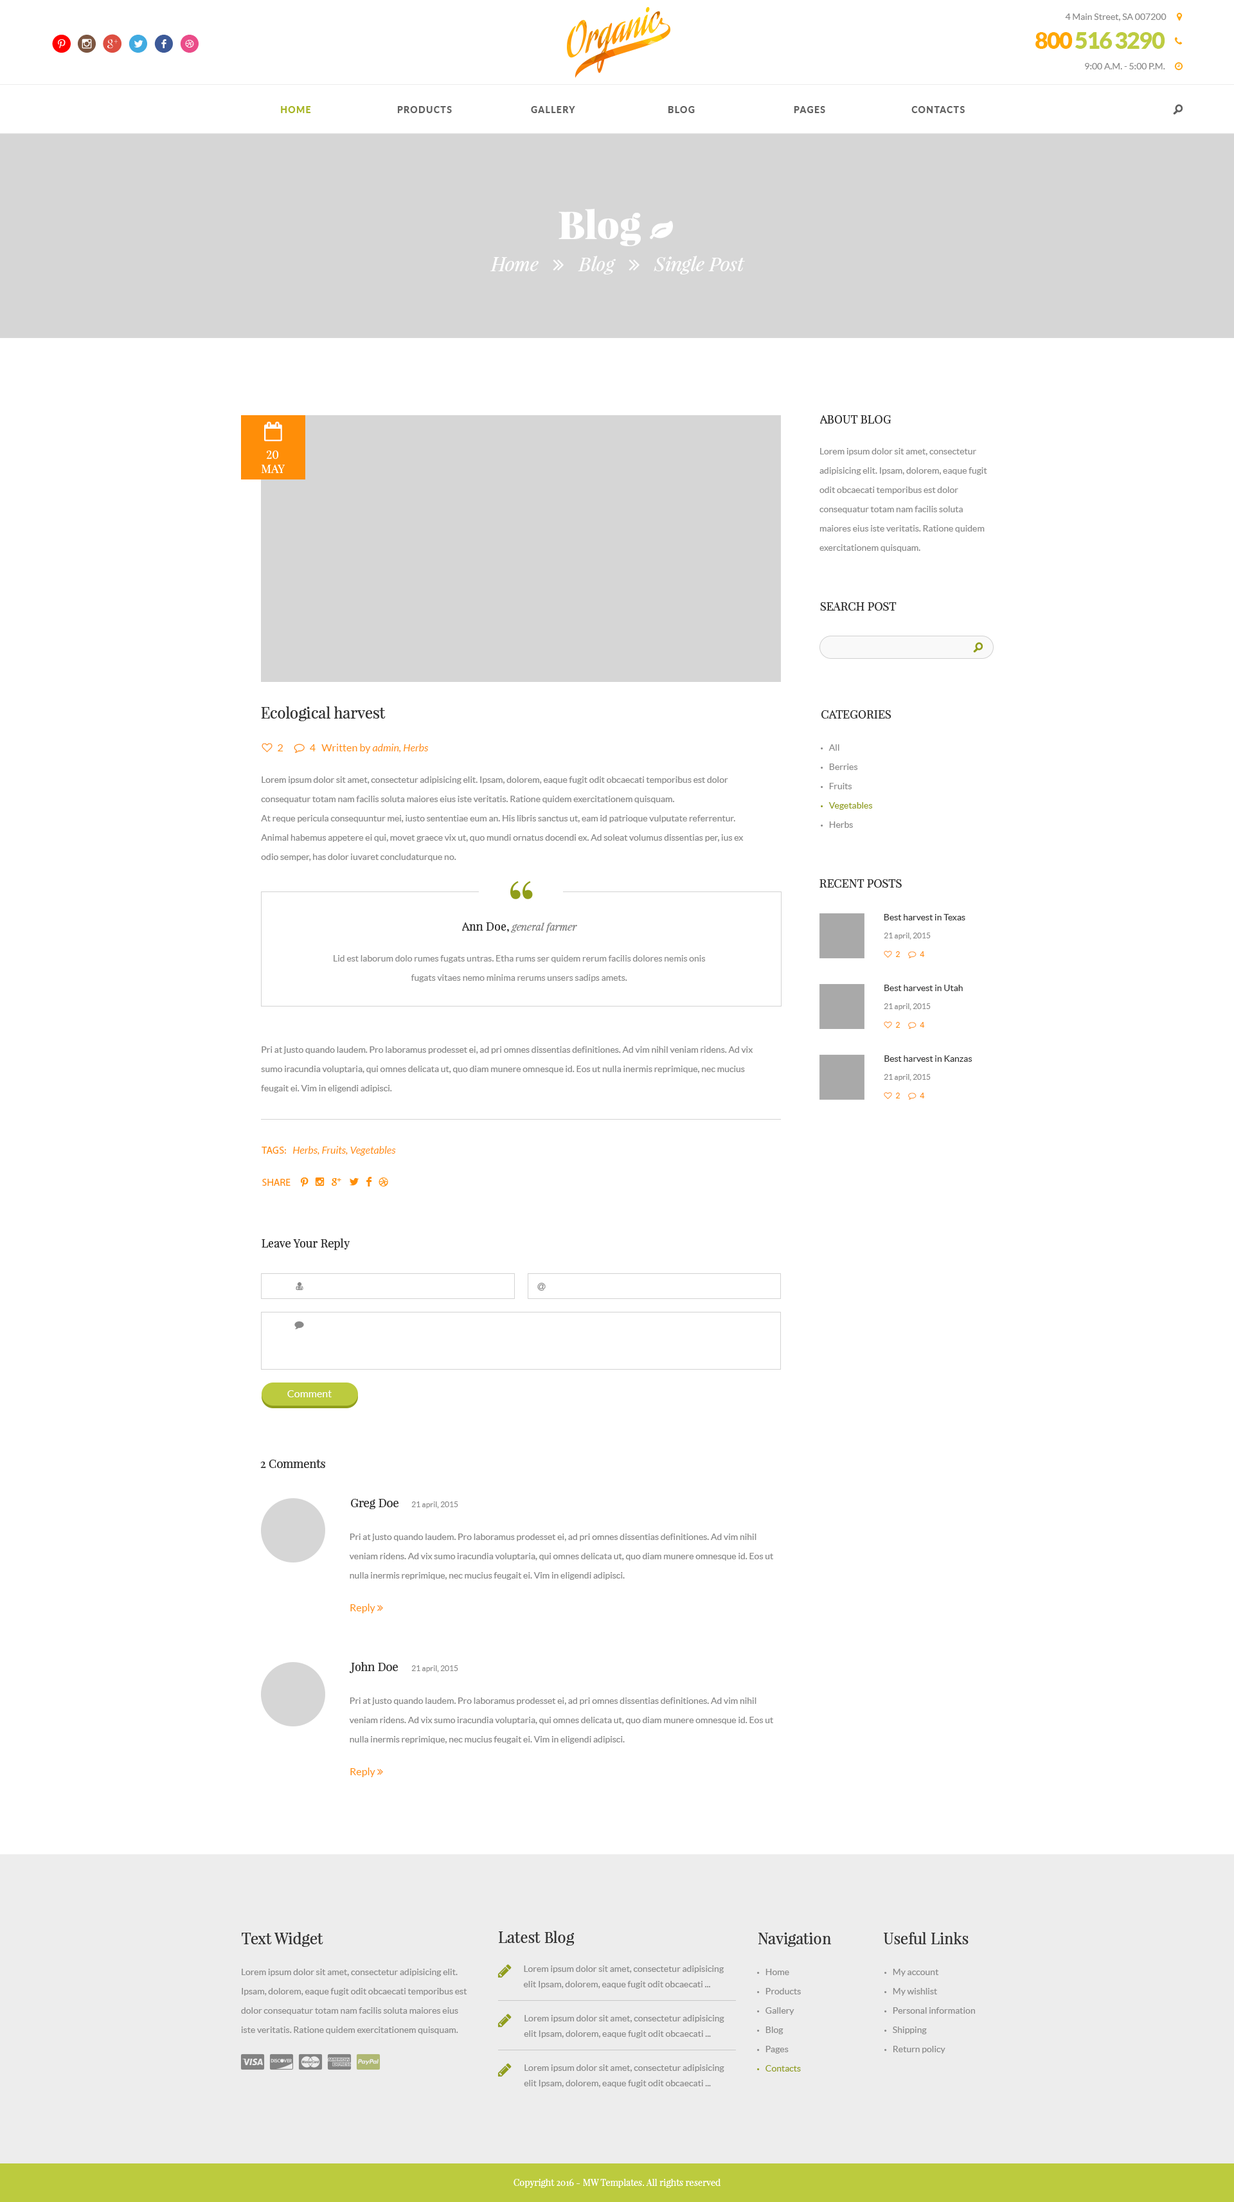
<style>
.page{position:relative;width:1234px;height:2202px;background:#ffffff}
.page>*{position:absolute;margin:0}
.t1{font:9px "Lato-Regular";color:#898989}
.t2{font:25.7px "SocialicoPlus";letter-spacing:0.2em;color:#ff0000}
.t3{font:25.7px "SocialicoPlus";letter-spacing:0.2em;color:#7c5641}
.t4{font:25.7px "SocialicoPlus";letter-spacing:0.2em;color:#dd4e41}
.t5{font:25.7px "Socialico";letter-spacing:0.2em;color:#41abe1}
.t6{font:25.7px "Socialico";letter-spacing:0.2em;color:#3d5a98}
.t7{font:25.7px "Socialico";letter-spacing:0.2em;color:#ea4c89}
.t8{font:23.1px "Lato-Black";letter-spacing:-0.05em;color:#bdcc41}
.t9{font:23.1px "Lato-Black";letter-spacing:-0.05em;color:#ffa800}
.t10{font:9px "Lato-Heavy";letter-spacing:0.1em;color:#a6b525;text-transform:uppercase}
.t11{font:9px "Lato-Heavy";letter-spacing:0.1em;color:#606060;text-transform:uppercase}
.t12{font:19.3px "SocialicoPlus";color:#606060;text-transform:uppercase}
.t13{font:11.6px "PlayfairDisplay-Regular";color:#333333;text-transform:uppercase}
.t14{font:9px/19.3px "Lato-Regular";color:#898989}
.t15{font:11.6px "PlayfairDisplay-Regular";color:#ffffff;text-transform:uppercase}
.t16{font:19.3px "SocialicoPlus";color:#909e1a;text-transform:uppercase}
.t17{font:15.4px "PlayfairDisplay-Regular";color:#333333}
.t18{font:9px/19.3px "Lato-Regular";color:#909e1a}
.t19{font:9px/19.3px "MyriadPro-Regular";color:#898989;text-transform:uppercase}
.t20{font:9px/19.3px "MyriadPro-Regular";color:#909e1a;text-transform:uppercase}
.t21{font:70.8px "PlayfairDisplay-Regular";color:#909e1a}
.t22{font:9px "Lato-Regular";color:#333333}
.t23{font:10.3px "PlayfairDisplay-Italic";color:#898989}
.t24{font:11.6px "PlayfairDisplay-Regular";color:#333333}
.t25{font:7.7px "Lato-Regular";color:#898989}
.t26{font:10.3px "Lato-Italic";color:#ff8e08}
.t27{font:10.3px "MyriadPro-Regular";color:#ff8e08}
.t28{font:15.4px "SocialicoPlus";letter-spacing:0.4em;color:#ff8e08;text-transform:uppercase}
.t29{font:15.4px "Socialico";letter-spacing:0.4em;color:#ff8e08;text-transform:uppercase}
.t30{font:10.3px "Lato-Regular";color:#ffffff}
.t31{font:9px/15.4px "Lato-Regular";color:#898989}
.t32{font:9px "PlayfairDisplay-Regular";color:#ffffff}
</style>
<div class="page">
<p class="t1" style="left:1065px;top:14px;width:102px;height:7px">4 Main Street, SA 007200</p>
<p class="t2" style="left:52px;top:34px;width:147px;height:19px">p<span class="t3">i</span><span class="t4">h</span><span class="t5">l</span><span class="t6">f</span><span class="t7">d</span></p>
<p class="t8" style="left:1036px;top:32px;width:130px;height:17px"><span class="t9">800</span> 516 3290</p>
<p class="t1" style="left:1085px;top:63px;width:81px;height:6px">9:00 A.M. - 5:00 P.M.</p>
<p class="t10" style="left:281px;top:106px;width:30px;height:7px">Home</p>
<p class="t11" style="left:397px;top:106px;width:55px;height:7px">Products</p>
<p class="t11" style="left:531px;top:106px;width:44px;height:7px">Gallery</p>
<p class="t11" style="left:668px;top:106px;width:27px;height:7px">Blog</p>
<p class="t11" style="left:794px;top:106px;width:31px;height:7px">Pages</p>
<p class="t11" style="left:912px;top:106px;width:53px;height:7px">Contacts</p>
<p class="t12" style="left:1173px;top:104px;width:11px;height:10px">o</p>
<p class="t13" style="left:820px;top:415px;width:71px;height:9px">About blog</p>
<p class="t14" style="left:820px;top:448px;width:167px;height:104px">Lorem ipsum dolor sit amet, consectetur adipisicing elit. Ipsam, dolorem, eaque fugit odit obcaecati temporibus est dolor consequatur totam nam facilis soluta maiores eius iste veritatis. Ratione quidem exercitationem quisquam.</p>
<p class="t15" style="left:262px;top:451px;width:23px;height:22px;text-align:center">20<br>may</p>
<p class="t13" style="left:820px;top:602px;width:77px;height:9px">Search post</p>
<p class="t16" style="left:973px;top:642px;width:11px;height:10px">o</p>
<p class="t17" style="left:261px;top:706px;width:125px;height:15px">Ecological harvest</p>
<p class="t13" style="left:822px;top:710px;width:70px;height:9px">Categories</p>
<p class="t18" style="left:821px;top:744px;width:52px;height:84px"><span class="t19">•   </span><span class="t14">All<br></span><span class="t19">•   </span><span class="t14">Berries<br></span><span class="t19">•   </span><span class="t14">Fruits<br></span><span class="t20">•   </span>Vegetables<br><span class="t19">•   </span><span class="t14">Herbs</span></p>
<p class="t14" style="left:261px;top:777px;width:492px;height:316px">Lorem ipsum dolor sit amet, consectetur adipisicing elit. Ipsam, dolorem, eaque fugit odit obcaecati temporibus est dolor consequatur totam nam facilis soluta maiores eius iste veritatis. Ratione quidem exercitationem quisquam.<br>At reque pericula consequuntur mei, iusto sententiae eum an. His libris sanctus ut, eam id patrioque vulputate referrentur. Animal habemus appetere ei qui, movet graece vix ut, quo mundi ornatus docendi ex. Ad soleat volumus dissentias per, ius ex odio semper, has dolor iuvaret concludaturque no.<br><br>At ponderum elaboraret reprehendunt eam, utroque similique te nam. Mazim simul hendrerit et eam, hinc duis ferri cu has, mel probo probatus praesent ea. Integre laboramus ea ius. Elit lorem mnesarchum ut cum. Ut legendos electram similique mea. Oblique fierent lobortis sed at, alii dicam ne vix.<br><br>Altera ullamcorper sit et. Ei dolor percipit accommodare vel. An quis velit constituto eum, his omnis denique ad, ad eam amet epicurei omittantur. Mel fuisset reformidans te, tale commodo ad nec.<br><br><br>Pri at justo quando laudem. Pro laboramus prodesset ei, ad pri omnes dissentias definitiones. Ad vim nihil veniam ridens. Ad vix sumo iracundia voluptaria, qui omnes delicata ut, quo diam munere omnesque id. Eos ut nulla inermis reprimique, nec mucius feugait ei. Vim in eligendi adipisci.</p>
<p class="t21" style="left:510px;top:881px;width:23px;height:18px">“</p>
<p class="t13" style="left:820px;top:879px;width:82px;height:9px">RECENT POSTS</p>
<p class="t22" style="left:884px;top:914px;width:82px;height:7px">Best harvest in Texas</p>
<p class="t23" style="left:462px;top:923px;width:115px;height:10px"><span class="t24">Ann Doe,</span> general farmer</p>
<p class="t25" style="left:884px;top:933px;width:47px;height:7px">21 april, 2015</p>
<p class="t14" style="left:334px;top:955px;width:372px;height:27px;text-align:center">Lid est laborum dolo rumes fugats untras. Etha rums ser quidem rerum facilis dolores nemis onis fugats vitaes nemo minima rerums unsers sadips amets.</p>
<p class="t22" style="left:885px;top:985px;width:78px;height:6px">Best harvest in Utah</p>
<p class="t25" style="left:884px;top:1004px;width:47px;height:7px">21 april, 2015</p>
<p class="t22" style="left:885px;top:1056px;width:88px;height:6px">Best harvest in Kanzas</p>
<p class="t25" style="left:884px;top:1074px;width:47px;height:7px">21 april, 2015</p>
<p class="t26" style="left:262px;top:1146px;width:134px;height:10px"><span class="t27">TAGS:  </span> Herbs, Fruits, Vegetables</p>
<p class="t27" style="left:262px;top:1179px;width:29px;height:7px">SHARE</p>
<p class="t28" style="left:301px;top:1177px;width:87px;height:10px">pih<span class="t29">lfd</span></p>
<p class="t24" style="left:262px;top:1238px;width:88px;height:12px">Leave Your Reply</p>
<p class="t30" style="left:287px;top:1390px;width:45px;height:8px">Comment</p>
<p class="t24" style="left:260px;top:1460px;width:65px;height:8px">2 Comments</p>
<p class="t24" style="left:351px;top:1499px;width:48px;height:10px">Greg Doe</p>
<p class="t25" style="left:411px;top:1502px;width:47px;height:7px">21 april, 2015</p>
<p class="t14" style="left:349px;top:1534px;width:424px;height:46px">Pri at justo quando laudem. Pro laboramus prodesset ei, ad pri omnes dissentias definitiones. Ad vim nihil veniam ridens. Ad vix sumo iracundia voluptaria, qui omnes delicata ut, quo diam munere omnesque id. Eos ut nulla inermis reprimique, nec mucius feugait ei. Vim in eligendi adipisci.</p>
<p class="t24" style="left:349px;top:1662px;width:49px;height:11px">John Doe</p>
<p class="t25" style="left:411px;top:1666px;width:47px;height:7px">21 april, 2015</p>
<p class="t14" style="left:349px;top:1698px;width:424px;height:46px">Pri at justo quando laudem. Pro laboramus prodesset ei, ad pri omnes dissentias definitiones. Ad vim nihil veniam ridens. Ad vix sumo iracundia voluptaria, qui omnes delicata ut, quo diam munere omnesque id. Eos ut nulla inermis reprimique, nec mucius feugait ei. Vim in eligendi adipisci.</p>
<p class="t17" style="left:242px;top:1932px;width:81px;height:15px">Text Widget</p>
<p class="t17" style="left:499px;top:1931px;width:76px;height:15px">Latest Blog</p>
<p class="t17" style="left:759px;top:1932px;width:73px;height:15px">Navigation</p>
<p class="t17" style="left:884px;top:1932px;width:85px;height:13px">Useful Links</p>
<p class="t14" style="left:241px;top:1969px;width:226px;height:66px">Lorem ipsum dolor sit amet, consectetur adipisicing elit. Ipsam, dolorem, eaque fugit odit obcaecati temporibus est dolor consequatur totam nam facilis soluta maiores eius iste veritatis. Ratione quidem exercitationem quisquam.</p>
<p class="t31" style="left:523px;top:1966px;width:201px;height:23px">Lorem ipsum dolor sit amet, consectetur adipisicing elit Ipsam, dolorem, eaque fugit odit obcaecati ...</p>
<p class="t14" style="left:757px;top:1969px;width:44px;height:103px"><span class="t19">•   </span>Home<br><span class="t19">•   </span>Products<br><span class="t19">•   </span>Gallery<br><span class="t19">•   </span>Blog<br><span class="t19">•   </span>Pages<br><span class="t20">•   </span><span class="t18">Contacts</span></p>
<p class="t14" style="left:885px;top:1969px;width:90px;height:85px"><span class="t19">•   </span>My account<br><span class="t19">•   </span>My wishlist<br><span class="t19">•   </span>Personal information<br><span class="t19">•   </span>Shipping<br><span class="t19">•   </span>Return policy</p>
<p class="t31" style="left:524px;top:2015px;width:200px;height:24px">Lorem ipsum dolor sit amet, consectetur adipisicing elit Ipsam, dolorem, eaque fugit odit obcaecati ...</p>
<p class="t31" style="left:524px;top:2065px;width:200px;height:23px">Lorem ipsum dolor sit amet, consectetur adipisicing elit Ipsam, dolorem, eaque fugit odit obcaecati ...</p>
<p class="t32" style="left:514px;top:2179px;width:207px;height:9px">Copyright 2016 - MW Templates. All rights reserved</p>
</div>
